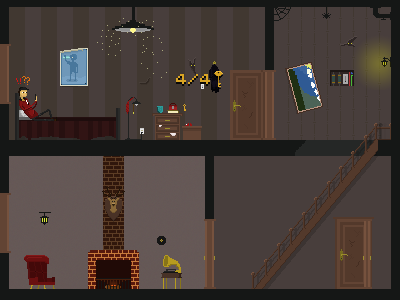
<style>
.page{position:relative;width:400px;height:300px;background:#483e3c}
.page>*{position:absolute;margin:0}
.t1{font:16px "I-pixel-u";letter-spacing:0.025em;color:#d9a424;text-transform:uppercase}
</style>
<div class="page">
<p class="t1" style="left:176px;top:74px;width:34px;height:10px">4/4</p>
</div>
